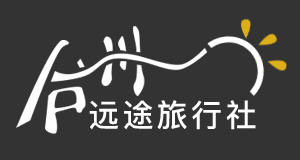
<style>
.page{position:relative;width:300px;height:160px;background:#333333}
.page>*{position:absolute;margin:0}
.t1{font:31.2px "PingFang-SC-Bold";letter-spacing:0.1em;color:#ffffff}
</style>
<div class="page">
<p class="t1" style="left:89px;top:100px;width:167px;height:30px">远途旅行社</p>
</div>
